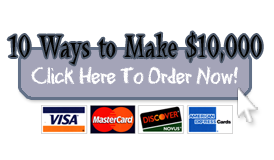
<style>
.page{position:relative;width:274px;height:160px;background:#ffffff}
.page>*{position:absolute;margin:0}
.t1{font:32.2px "LaBambaLetPlain";color:#030301;scale:0.79 1}
.t2{font:25px "EraserDust";letter-spacing:-0.04em;color:#ffffff;scale:0.9 1}
</style>
<div class="page">
<p class="t1" style="left:8px;top:32px;width:254px;height:33px">10 Ways to Make $10,000</p>
<p class="t2" style="left:31px;top:66px;width:207px;height:19px">Click Here To Order Now!</p>
</div>
